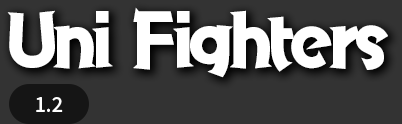
<style>
.page{position:relative;width:402px;height:124px;background:#333333}
.page>*{position:absolute;margin:0}
.t1{font:72px "GospelStd-EB";letter-spacing:-0.075em;color:#ffffff}
.t2{font:20px "SourceHanSansHC-Medium";color:#ffffff}
</style>
<div class="page">
<p class="t1" style="left:7px;top:7px;width:381px;height:71px">Uni Fighters</p>
<p class="t2" style="left:36px;top:97px;width:27px;height:15px">1.2</p>
</div>
